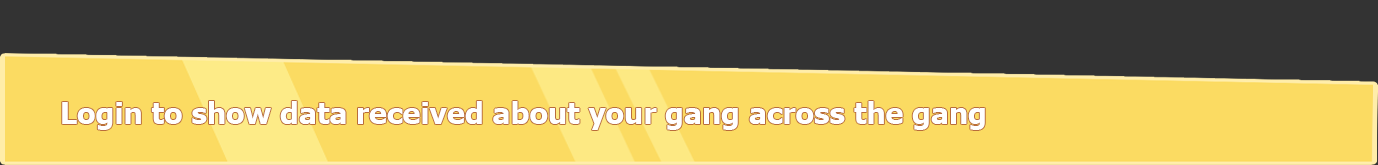
<style>
.page{position:relative;width:1378px;height:165px;background:#fbdb62}
.page>*{position:absolute;margin:0}
.t1{font:30px "Tahoma-Bold";color:#ffffff}
</style>
<div class="page">
<p class="t1" style="left:62px;top:101px;width:923px;height:29px">Login to show data received about your gang across the gang</p>
</div>
